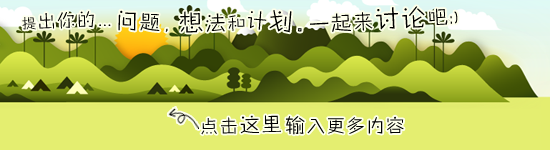
<style>
.page{position:relative;width:550px;height:150px;background:#e4ee70}
.page>*{position:absolute;margin:0}
.t1{font:20px "FZZHYJW--GB1-0";letter-spacing:0.1em;color:#000000}
.t2{font:24px "FZZHYJW--GB1-0";letter-spacing:0.1em;color:#000000}
.t3{font:18px "FZZHYJW--GB1-0";letter-spacing:0.1em;color:#000000}
.t4{font:14px "FZZHYJW--GB1-0";letter-spacing:0.1em;color:#000000}
.t5{font:22px "FZZHYJW--GB1-0";letter-spacing:0.1em;color:#000000}
.t6{font:14px "FZQTJW--GB1-0";letter-spacing:0.1em;color:#000000}
</style>
<div class="page">
<p class="t1" style="left:310px;top:6px;width:148px;height:26px;rotate:-3deg">一起来<span class="t2">讨论</span>吧:)</p>
<p class="t3" style="left:22px;top:11px;width:72px;height:19px;rotate:-2deg"><span class="t4">提</span>出你的</p>
<p class="t1" style="left:118px;top:10px;width:50px;height:22px;rotate:1deg"><span class="t5">问</span>题，</p>
<p class="t2" style="left:179px;top:11px;width:66px;height:22px;rotate:-2deg">想<span class="t1">法</span><span class="t3">和</span></p>
<p class="t1" style="left:248px;top:10px;width:54px;height:23px;rotate:5deg">计<span class="t2">划</span>。</p>
<p class="t6" style="left:99px;top:24px;width:12px;height:2px">…</p>
<p class="t3" style="left:201px;top:115px;width:80px;height:20px;rotate:-2deg">点击<span class="t1">这里</span></p>
<p class="t3" style="left:286px;top:116px;width:118px;height:19px"><span class="t1">输</span>入更多内容</p>
</div>
